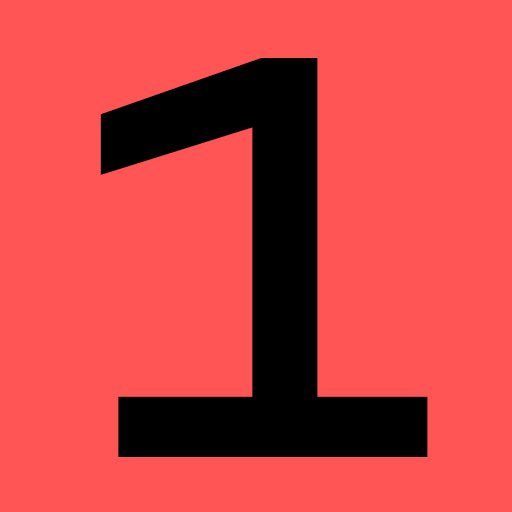
<style>
.page{position:relative;width:512px;height:512px;background:#ff5555}
.page>*{position:absolute;margin:0}
.t1{font:860px "Corbel";color:#000000}
</style>
<div class="page">
<p class="t1" style="left:100px;top:58px;width:328px;height:399px">1</p>
</div>
